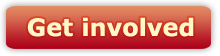
<style>
.page{position:relative;width:220px;height:56px}
.page>*{position:absolute;margin:0}
.t1{font:24px "Verdana-Bold";color:#fef7ca}
</style>
<div class="page">
<p class="t1" style="left:27px;top:17px;width:167px;height:20px">Get involved</p>
</div>
